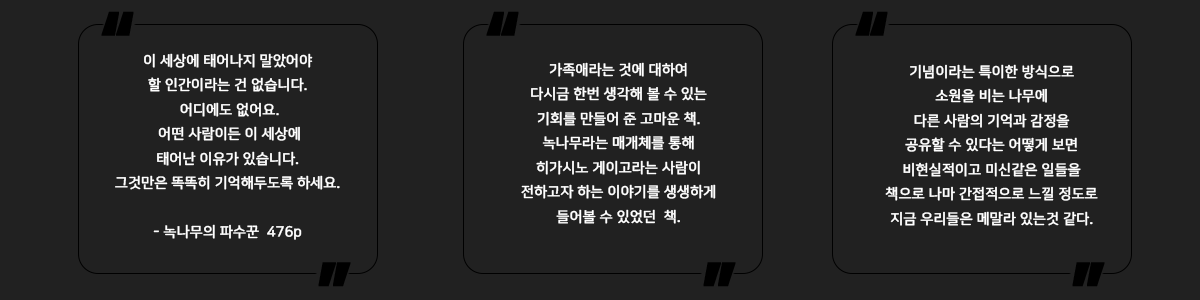
<style>
.page{position:relative;width:1200px;height:300px;background:#212121}
.page>*{position:absolute;margin:0}
.t1{font:14px "NanumSquareR";color:#ffffff;font-weight:bold}
</style>
<div class="page">
<p class="t1" style="left:115px;top:53px;width:225px;height:187px;text-align:center">이 세상에 태어나지 말았어야 <br>할 인간이라는 건 없습니다.<br> 어디에도 없어요.<br> 어떤 사람이든 이 세상에 <br>태어난 이유가 있습니다. <br>그것만은 똑똑히 기억해두도록 하세요.<br><br>- 녹나무의 파수꾼  476p</p>
<p class="t1" style="left:521px;top:62px;width:195px;height:162px;text-align:center">가족애라는 것에 대하여<br>다시금 한번 생각해 볼 수 있는<br>기회를 만들어 준 고마운 책.<br>녹나무라는 매개체를 통해<br>히가시노 게이고라는 사람이<br>전하고자 하는 이야기를 생생하게<br>들어볼 수 있었던  책.</p>
<p class="t1" style="left:885px;top:64px;width:213px;height:162px;text-align:center">기념이라는 특이한 방식으로<br>소원을 비는 나무에<br>다른 사람의 기억과 감정을<br>공유할 수 있다는 어떻게 보면<br>비현실적이고 미신같은 일들을<br>책으로 나마 간접적으로 느낄 정도로<br>지금 우리들은 메말라 있는것 같다.</p>
</div>
